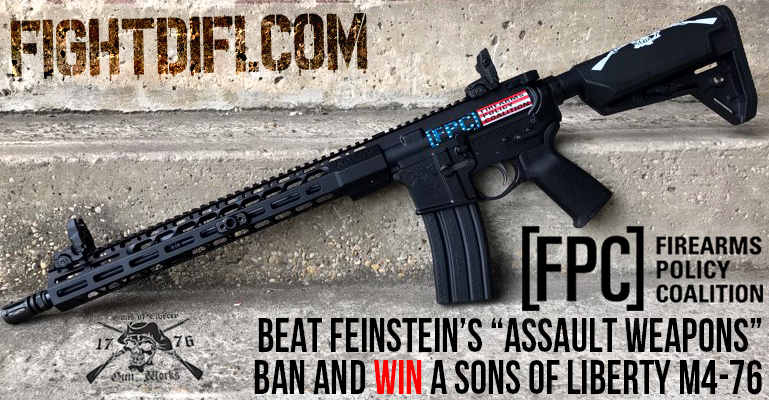
<style>
.page{position:relative;width:769px;height:400px}
.page>*{position:absolute;margin:0}
.t1{font:94.5px "Spray.ME";letter-spacing:0.02em;scale:0.95 1}
.t2{font:48.6px/42px "BebasNeueBold";color:#000000;scale:0.88 1}
.t3{font:48.6px/42px "BebasNeueBold";color:#ff0000;scale:0.88 1}
</style>
<div class="page">
<p class="t1" style="left:9px;top:10px;width:359px;height:72px;rotate:-1deg">FIGHTDIFI.COM</p>
<p class="t1" style="left:9px;top:10px;width:359px;height:72px;rotate:-1deg">FIGHTDIFI.COM</p>
<p class="t2" style="left:254px;top:318px;width:508px;height:77px;text-align:right">BEAT feinstein’s “ASSAULT WEAPONS” <br>BAN AND <span class="t3">win </span>A SONS OF LIBERTY M4-76</p>
</div>
